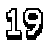
<style>
.page{position:relative;width:48px;height:48px;background:#ffffff}
.page>*{position:absolute;margin:0}
.t1{font:36px "KarmaFuture-Regular";color:#010101}
</style>
<div class="page">
<p class="t1" style="left:6px;top:8px;width:37px;height:32px">19</p>
</div>
